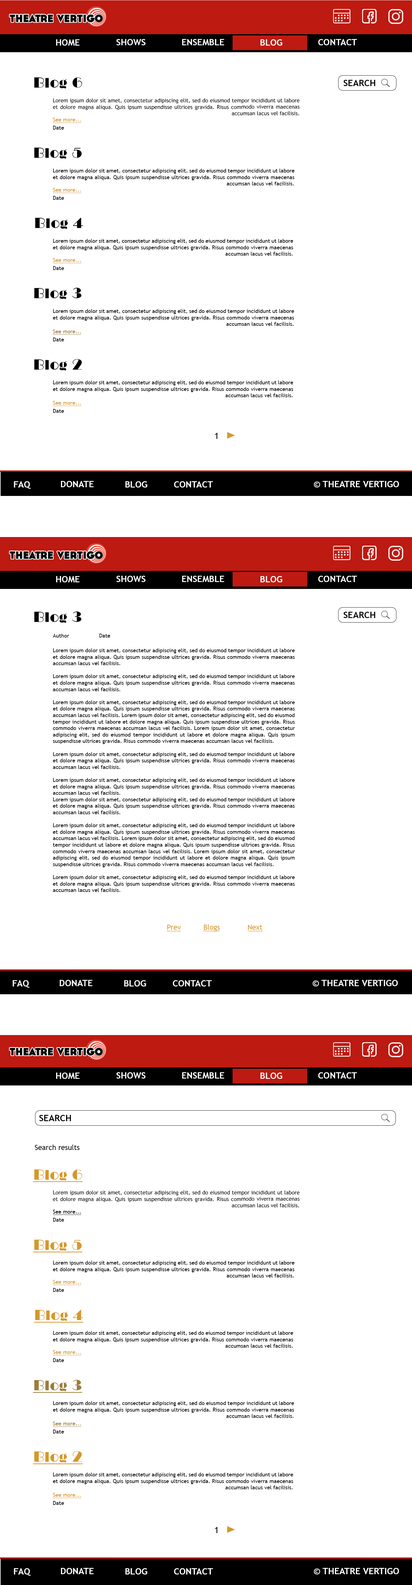
<style>
.page{position:relative;width:412px;height:1585px;background:#ffffff}
.page>*{position:absolute;margin:0}
.t1{font:9px "TrebuchetMS-Bold";color:#fefefe;text-transform:uppercase}
.t2{font:14.4px "LTCBroadway-Regular";color:#000000}
.t3{font:9px "TrebuchetMS-Bold";color:#000000;text-transform:uppercase}
.t4{font:5.4px "TrebuchetMS";color:#000000}
.t5{font:5.4px "TrebuchetMS";color:#d6972a;text-decoration:underline}
.t6{font:5.4px "TrebuchetMS";color:#9d7c39;text-decoration:underline}
.t7{font:9px "TrebuchetMS";color:#000000}
.t8{font:9px "TrebuchetMS-Bold";color:#ffffff;text-transform:uppercase}
.t9{font:7.2px "TrebuchetMS";color:#d6972a;text-decoration:underline}
.t10{font:7.2px "TrebuchetMS";color:#000000}
.t11{font:14.4px "LTCBroadway-Regular";color:#d6972a;text-decoration:underline}
.t12{font:5.4px "TrebuchetMS";color:#000000;text-decoration:underline}
.t13{font:14.4px "LTCBroadway-Regular";color:#9d7c39;text-decoration:underline}
</style>
<div class="page">
<p class="t1" style="left:56px;top:39px;width:24px;height:7px">Home</p>
<p class="t1" style="left:116px;top:39px;width:30px;height:6px">Shows</p>
<p class="t1" style="left:182px;top:39px;width:42px;height:6px">Ensemble</p>
<p class="t1" style="left:260px;top:39px;width:22px;height:7px">Blog</p>
<p class="t1" style="left:318px;top:39px;width:39px;height:6px">Contact</p>
<p class="t2" style="left:34px;top:77px;width:48px;height:12px">Blog 6</p>
<p class="t3" style="left:344px;top:80px;width:31px;height:6px">Search</p>
<p class="t4" style="left:53px;top:98px;width:247px;height:18px;text-align:justify">Lorem ipsum dolor sit amet, consectetur adipiscing elit, sed do eiusmod tempor incididunt ut labore et dolore magna aliqua. Quis ipsum suspendisse ultrices gravida. Risus commodo viverra maecenas accumsan lacus vel facilisis.</p>
<p class="t5" style="left:53px;top:118px;width:28px;height:5px">See more...</p>
<p class="t4" style="left:53px;top:126px;width:11px;height:4px">Date</p>
<p class="t2" style="left:34px;top:148px;width:48px;height:11px">Blog 5</p>
<p class="t4" style="left:53px;top:169px;width:242px;height:16px;text-align:justify">Lorem ipsum dolor sit amet, consectetur adipiscing elit, sed do eiusmod tempor incididunt ut labore et dolore magna aliqua. Quis ipsum suspendisse ultrices gravida. Risus commodo viverra maecenas accumsan lacus vel facilisis.</p>
<p class="t5" style="left:53px;top:188px;width:28px;height:5px">See more...</p>
<p class="t4" style="left:53px;top:196px;width:11px;height:4px">Date</p>
<p class="t2" style="left:35px;top:218px;width:48px;height:11px">Blog 4</p>
<p class="t4" style="left:53px;top:239px;width:240px;height:17px;text-align:justify">Lorem ipsum dolor sit amet, consectetur adipiscing elit, sed do eiusmod tempor incididunt ut labore et dolore magna aliqua. Quis ipsum suspendisse ultrices gravida. Risus commodo viverra maecenas accumsan lacus vel facilisis.</p>
<p class="t5" style="left:53px;top:258px;width:28px;height:5px">See more...</p>
<p class="t4" style="left:53px;top:266px;width:11px;height:4px">Date</p>
<p class="t2" style="left:34px;top:288px;width:48px;height:11px">Blog 3</p>
<p class="t4" style="left:53px;top:309px;width:241px;height:17px;text-align:justify">Lorem ipsum dolor sit amet, consectetur adipiscing elit, sed do eiusmod tempor incididunt ut labore et dolore magna aliqua. Quis ipsum suspendisse ultrices gravida. Risus commodo viverra maecenas accumsan lacus vel facilisis.</p>
<p class="t6" style="left:53px;top:329px;width:28px;height:6px">See more...</p>
<p class="t4" style="left:53px;top:338px;width:11px;height:3px">Date</p>
<p class="t2" style="left:34px;top:359px;width:48px;height:12px">Blog 2</p>
<p class="t4" style="left:53px;top:380px;width:240px;height:17px;text-align:justify">Lorem ipsum dolor sit amet, consectetur adipiscing elit, sed do eiusmod tempor incididunt ut labore et dolore magna aliqua. Quis ipsum suspendisse ultrices gravida. Risus commodo viverra maecenas accumsan lacus vel facilisis.</p>
<p class="t5" style="left:53px;top:401px;width:28px;height:5px">See more...</p>
<p class="t4" style="left:53px;top:409px;width:11px;height:4px">Date</p>
<p class="t7" style="left:215px;top:433px;width:3px;height:6px">1</p>
<p class="t8" style="left:14px;top:481px;width:17px;height:8px">FAQ</p>
<p class="t8" style="left:61px;top:481px;width:33px;height:6px">Donate</p>
<p class="t8" style="left:125px;top:481px;width:22px;height:7px">Blog</p>
<p class="t8" style="left:174px;top:481px;width:39px;height:7px">Contact</p>
<p class="t8" style="left:314px;top:481px;width:85px;height:7px">© Theatre Vertigo</p>
<p class="t1" style="left:56px;top:576px;width:24px;height:6px">Home</p>
<p class="t1" style="left:116px;top:576px;width:30px;height:6px">Shows</p>
<p class="t1" style="left:182px;top:576px;width:42px;height:6px">Ensemble</p>
<p class="t1" style="left:260px;top:576px;width:22px;height:6px">Blog</p>
<p class="t1" style="left:318px;top:576px;width:39px;height:6px">Contact</p>
<p class="t2" style="left:34px;top:611px;width:48px;height:12px">Blog 3</p>
<p class="t3" style="left:344px;top:612px;width:31px;height:6px">Search</p>
<p class="t4" style="left:53px;top:634px;width:16px;height:4px">Author</p>
<p class="t4" style="left:99px;top:634px;width:11px;height:4px">Date</p>
<p class="t4" style="left:53px;top:648px;width:242px;height:244px;text-align:justify">Lorem ipsum dolor sit amet, consectetur adipiscing elit, sed do eiusmod tempor incididunt ut labore et dolore magna aliqua. Quis ipsum suspendisse ultrices gravida. Risus commodo viverra maecenas accumsan lacus vel facilisis. <br><br>Lorem ipsum dolor sit amet, consectetur adipiscing elit, sed do eiusmod tempor incididunt ut labore et dolore magna aliqua. Quis ipsum suspendisse ultrices gravida. Risus commodo viverra maecenas accumsan lacus vel facilisis. <br><br>Lorem ipsum dolor sit amet, consectetur adipiscing elit, sed do eiusmod tempor incididunt ut labore et dolore magna aliqua. Quis ipsum suspendisse ultrices gravida. Risus commodo viverra maecenas accumsan lacus vel facilisis. Lorem ipsum dolor sit amet, consectetur adipiscing elit, sed do eiusmod tempor incididunt ut labore et dolore magna aliqua. Quis ipsum suspendisse ultrices gravida. Risus commodo viverra maecenas accumsan lacus vel facilisis. Lorem ipsum dolor sit amet, consectetur adipiscing elit, sed do eiusmod tempor incididunt ut labore et dolore magna aliqua. Quis ipsum suspendisse ultrices gravida. Risus commodo viverra maecenas accumsan lacus vel facilisis. <br><br>Lorem ipsum dolor sit amet, consectetur adipiscing elit, sed do eiusmod tempor incididunt ut labore et dolore magna aliqua. Quis ipsum suspendisse ultrices gravida. Risus commodo viverra maecenas accumsan lacus vel facilisis. <br><br>Lorem ipsum dolor sit amet, consectetur adipiscing elit, sed do eiusmod tempor incididunt ut labore et dolore magna aliqua. Quis ipsum suspendisse ultrices gravida. Risus commodo viverra maecenas accumsan lacus vel facilisis. <br>Lorem ipsum dolor sit amet, consectetur adipiscing elit, sed do eiusmod tempor incididunt ut labore et dolore magna aliqua. Quis ipsum suspendisse ultrices gravida. Risus commodo viverra maecenas accumsan lacus vel facilisis. <br><br>Lorem ipsum dolor sit amet, consectetur adipiscing elit, sed do eiusmod tempor incididunt ut labore et dolore magna aliqua. Quis ipsum suspendisse ultrices gravida. Risus commodo viverra maecenas accumsan lacus vel facilisis. Lorem ipsum dolor sit amet, consectetur adipiscing elit, sed do eiusmod tempor incididunt ut labore et dolore magna aliqua. Quis ipsum suspendisse ultrices gravida. Risus commodo viverra maecenas accumsan lacus vel facilisis. Lorem ipsum dolor sit amet, consectetur adipiscing elit, sed do eiusmod tempor incididunt ut labore et dolore magna aliqua. Quis ipsum suspendisse ultrices gravida. Risus commodo viverra maecenas accumsan lacus vel facilisis. <br><br>Lorem ipsum dolor sit amet, consectetur adipiscing elit, sed do eiusmod tempor incididunt ut labore et dolore magna aliqua. Quis ipsum suspendisse ultrices gravida. Risus commodo viverra maecenas accumsan lacus vel facilisis.</p>
<p class="t9" style="left:167px;top:925px;width:14px;height:7px;text-align:center">Prev<br>Blog</p>
<p class="t9" style="left:203px;top:924px;width:17px;height:8px">Blogs</p>
<p class="t9" style="left:247px;top:925px;width:16px;height:7px">Next<br>Blog</p>
<p class="t8" style="left:13px;top:980px;width:16px;height:8px">FAQ</p>
<p class="t8" style="left:60px;top:980px;width:32px;height:6px">Donate</p>
<p class="t8" style="left:124px;top:980px;width:22px;height:6px">Blog</p>
<p class="t8" style="left:173px;top:980px;width:39px;height:6px">Contact</p>
<p class="t8" style="left:313px;top:980px;width:85px;height:6px">© Theatre Vertigo</p>
<p class="t1" style="left:56px;top:1073px;width:24px;height:6px">Home</p>
<p class="t1" style="left:116px;top:1072px;width:30px;height:7px">Shows</p>
<p class="t1" style="left:182px;top:1072px;width:42px;height:7px">Ensemble</p>
<p class="t1" style="left:260px;top:1073px;width:22px;height:6px">Blog</p>
<p class="t1" style="left:318px;top:1072px;width:39px;height:7px">Contact</p>
<p class="t3" style="left:39px;top:1115px;width:32px;height:6px">Search</p>
<p class="t10" style="left:35px;top:1145px;width:45px;height:5px">Search results</p>
<p class="t11" style="left:33px;top:1169px;width:50px;height:13px">Blog 6</p>
<p class="t4" style="left:53px;top:1190px;width:247px;height:18px;text-align:justify">Lorem ipsum dolor sit amet, consectetur adipiscing elit, sed do eiusmod tempor incididunt ut labore et dolore magna aliqua. Quis ipsum suspendisse ultrices gravida. Risus commodo viverra maecenas accumsan lacus vel facilisis.</p>
<p class="t12" style="left:53px;top:1210px;width:28px;height:5px">See more...</p>
<p class="t4" style="left:53px;top:1218px;width:11px;height:4px">Date</p>
<p class="t11" style="left:33px;top:1240px;width:49px;height:13px">Blog 5</p>
<p class="t4" style="left:53px;top:1261px;width:242px;height:16px;text-align:justify">Lorem ipsum dolor sit amet, consectetur adipiscing elit, sed do eiusmod tempor incididunt ut labore et dolore magna aliqua. Quis ipsum suspendisse ultrices gravida. Risus commodo viverra maecenas accumsan lacus vel facilisis.</p>
<p class="t5" style="left:53px;top:1280px;width:28px;height:5px">See more...</p>
<p class="t4" style="left:53px;top:1288px;width:11px;height:4px">Date</p>
<p class="t11" style="left:34px;top:1310px;width:49px;height:13px">Blog 4</p>
<p class="t4" style="left:53px;top:1331px;width:240px;height:17px;text-align:justify">Lorem ipsum dolor sit amet, consectetur adipiscing elit, sed do eiusmod tempor incididunt ut labore et dolore magna aliqua. Quis ipsum suspendisse ultrices gravida. Risus commodo viverra maecenas accumsan lacus vel facilisis.</p>
<p class="t5" style="left:53px;top:1350px;width:28px;height:5px">See more...</p>
<p class="t4" style="left:53px;top:1358px;width:11px;height:4px">Date</p>
<p class="t13" style="left:33px;top:1380px;width:49px;height:13px">Blog 3</p>
<p class="t4" style="left:53px;top:1401px;width:241px;height:17px;text-align:justify">Lorem ipsum dolor sit amet, consectetur adipiscing elit, sed do eiusmod tempor incididunt ut labore et dolore magna aliqua. Quis ipsum suspendisse ultrices gravida. Risus commodo viverra maecenas accumsan lacus vel facilisis.</p>
<p class="t6" style="left:53px;top:1421px;width:28px;height:6px">See more...</p>
<p class="t4" style="left:53px;top:1430px;width:11px;height:3px">Date</p>
<p class="t11" style="left:33px;top:1451px;width:50px;height:13px">Blog 2</p>
<p class="t4" style="left:53px;top:1472px;width:240px;height:17px;text-align:justify">Lorem ipsum dolor sit amet, consectetur adipiscing elit, sed do eiusmod tempor incididunt ut labore et dolore magna aliqua. Quis ipsum suspendisse ultrices gravida. Risus commodo viverra maecenas accumsan lacus vel facilisis.</p>
<p class="t5" style="left:53px;top:1493px;width:28px;height:5px">See more...</p>
<p class="t4" style="left:53px;top:1501px;width:11px;height:4px">Date</p>
<p class="t7" style="left:215px;top:1527px;width:3px;height:6px">1</p>
<p class="t8" style="left:14px;top:1568px;width:17px;height:8px">FAQ</p>
<p class="t8" style="left:61px;top:1568px;width:33px;height:6px">Donate</p>
<p class="t8" style="left:125px;top:1568px;width:22px;height:6px">Blog</p>
<p class="t8" style="left:174px;top:1568px;width:39px;height:6px">Contact</p>
<p class="t8" style="left:314px;top:1568px;width:85px;height:6px">© Theatre Vertigo</p>
</div>
